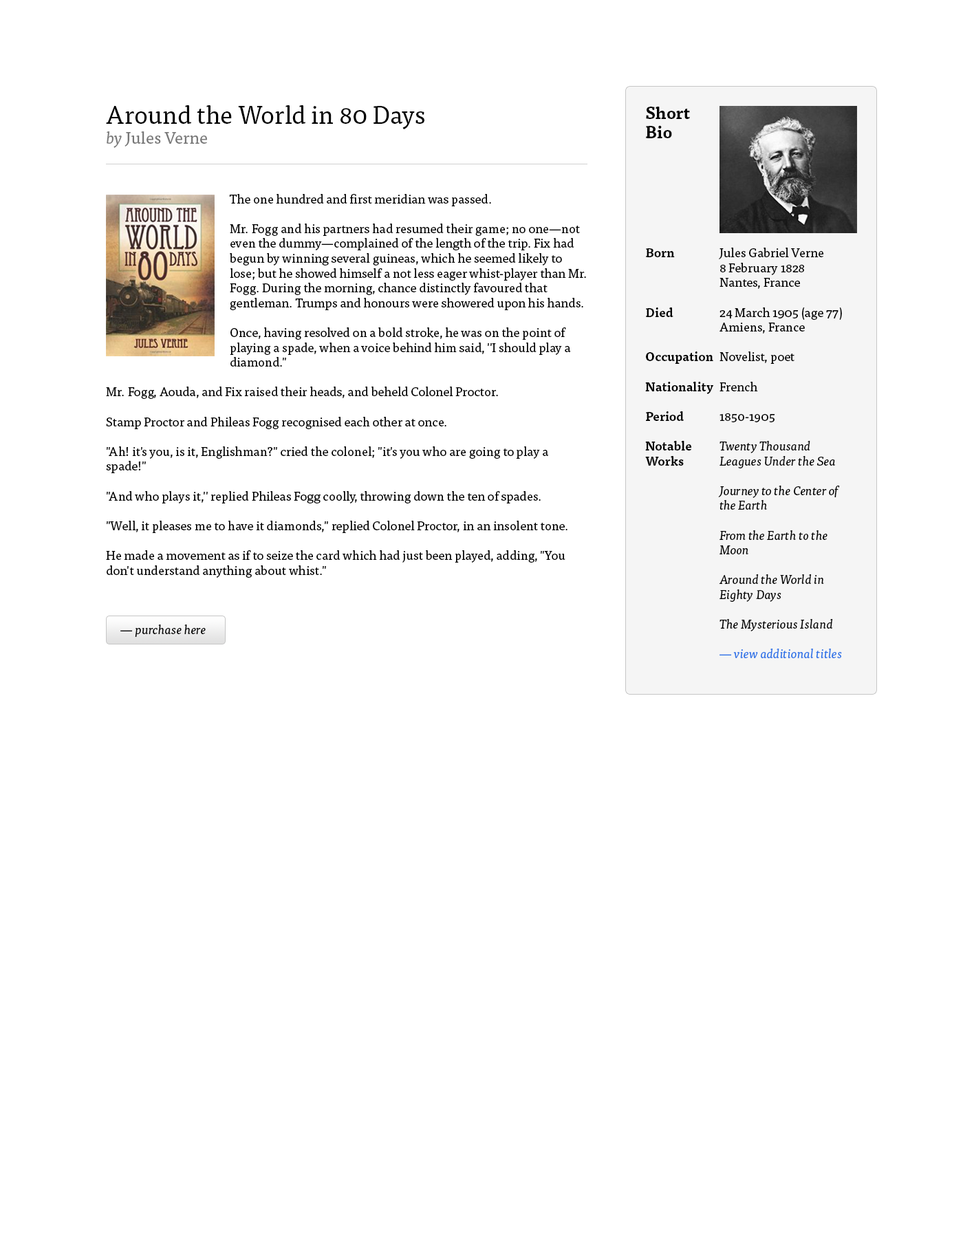
<style>
.page{position:relative;width:963px;height:1238px;background:#ffffff}
.page>*{position:absolute;margin:0}
.t1{font:12.4px "TisaPro";color:#000000}
.t2{font:24.8px "TisaPro";color:#000000}
.t3{font:16.5px "TisaPro-Ita";color:#777777}
.t4{font:16.5px "TisaPro";color:#777777}
.t5{font:12.4px "TisaPro-Ita";color:#000000}
.t6{font:16.5px "TisaPro-Bold";color:#000000}
.t7{font:12.4px "TisaPro-Bold";color:#000000}
.t8{font:12.4px "TisaPro-Ita";color:#2b72e7}
</style>
<div class="page">
<p class="t1" style="left:106px;top:105px;width:480px;height:473px"><span class="t2">Around the World in 80 Days<br></span><span class="t3">by</span><span class="t4"> Jules Verne<br></span><br><br><br>     The one hundred and first meridian was passed.<br><br>     Mr. Fogg and his partners had resumed their game; no one—not <br>     even the dummy—complained of the length of the trip. Fix had <br>     begun by winning several guineas, which he seemed likely to <br>     lose; but he showed himself a not less eager whist-player than Mr. <br>     Fogg. During the morning, chance distinctly favoured that<br>     gentleman. Trumps and honours were showered upon his hands.<br>     <br>     Once, having resolved on a bold stroke, he was on the point of <br>     playing a spade, when a voice behind him said, "I should play a <br>     diamond."<br><br>Mr. Fogg, Aouda, and Fix raised their heads, and beheld Colonel Proctor.<br><br>Stamp Proctor and Phileas Fogg recognised each other at once.<br><br>"Ah! it's you, is it, Englishman?" cried the colonel; "it's you who are going to play a<br>spade!"<br><br>"And who plays it," replied Phileas Fogg coolly, throwing down the ten of spades.<br><br>"Well, it pleases me to have it diamonds," replied Colonel Proctor, in an insolent tone.<br><br>He made a movement as if to seize the card which had just been played, adding, "You<br>don't understand anything about whist."<br><br>"Perhaps I do, as well as another," said Phileas Fogg, ris…</p>
<p class="t5" style="left:645px;top:107px;width:197px;height:551px"><span class="t6">Short<br>Bio<br><br><br><br><br><br><br><br></span><span class="t7">Born</span><span class="t1">  Jules Gabriel Verne<br>   8 February 1828<br>   Nantes, France<br><br></span><span class="t7">Died</span><span class="t1">  24 March 1905 (age 77)<br>   Amiens, France<br><br></span><span class="t7">Occupation</span><span class="t1"> Novelist, poet<br><br></span><span class="t7">Nationality</span><span class="t1"> French<br><br></span><span class="t7">Period </span><span class="t1"> 1850-1905<br><br></span><span class="t7">Notable  </span>Twenty Thousand<span class="t1"> <br></span><span class="t7">Works  </span>Leagues Under the Sea<br><br>   Journey to the Center of<br>   the Earth<br><br>   From the Earth to the      Moon<br><br>   Around the World in<br>   Eighty Days<br><br>   The Mysterious Island<br><br>   <span class="t8">— view additional titles</span></p>
<p class="t5" style="left:120px;top:625px;width:86px;height:12px">— purchase here</p>
</div>
